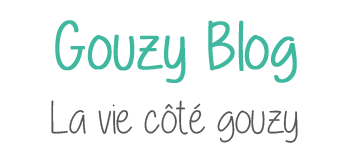
<style>
.page{position:relative;width:350px;height:150px;background:#ffffff}
.page>*{position:absolute;margin:0}
.t1{font:66.7px "Alittlesunshine";color:#3fb89f;font-weight:bold}
.t2{font:45.8px "Alittlesunshine";color:#555555}
</style>
<div class="page">
<p class="t1" style="left:55px;top:20px;width:242px;height:63px">Gouzy Blog</p>
<p class="t2" style="left:51px;top:100px;width:247px;height:43px">La vie côté gouzy</p>
</div>
